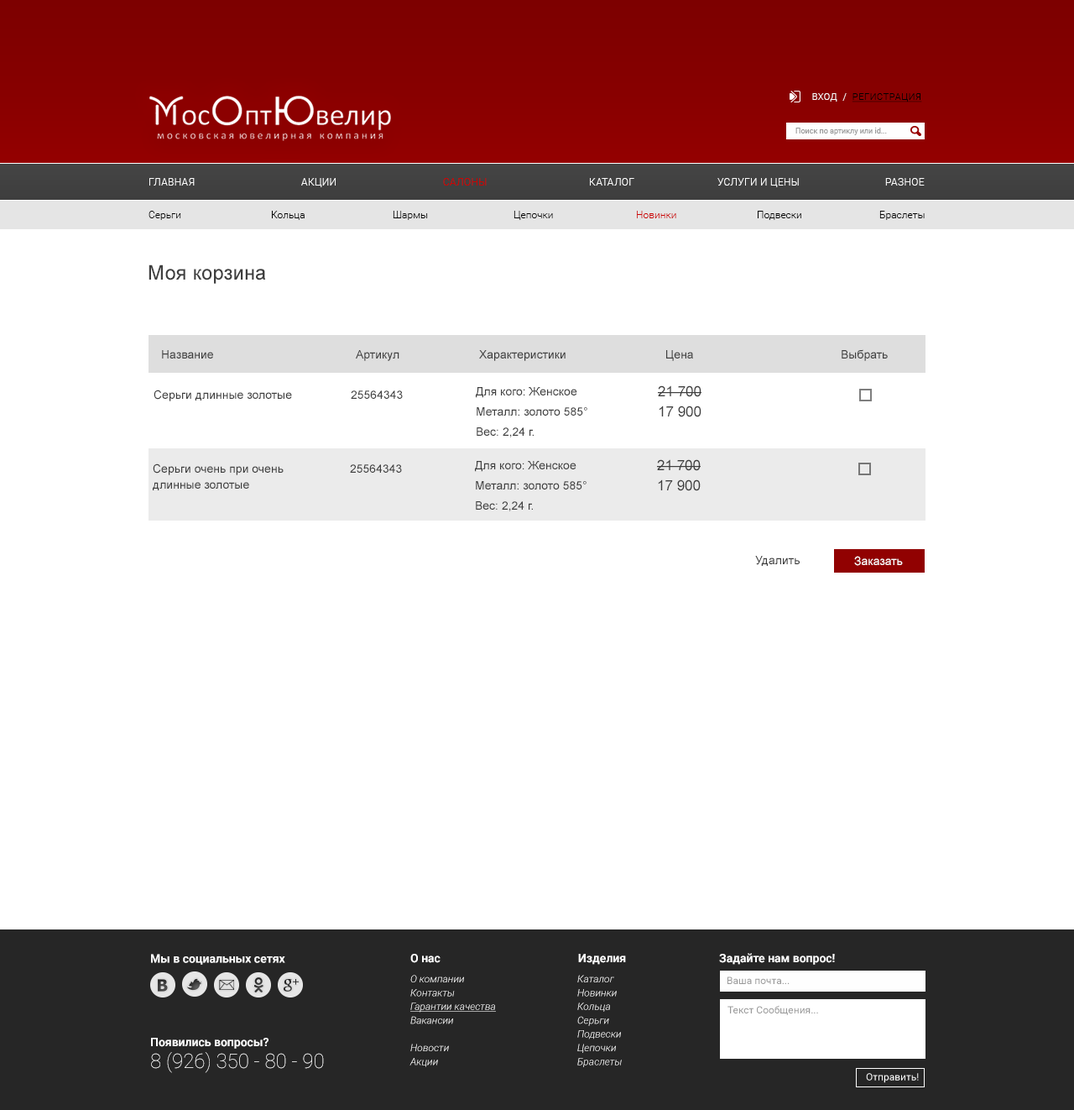
<style>
.page{position:relative;width:1074px;height:1110px;background:#ffffff}
.page>*{position:absolute;margin:0}
.t1{font:9.2px "Roboto-Light";letter-spacing:0.05em;color:#000000;text-transform:uppercase;text-decoration:underline}
.t2{font:9.2px "Roboto-Light";letter-spacing:0.05em;color:#ffffff;text-transform:uppercase}
.t3{font:7.6px "Roboto-Regular";color:#999999}
.t4{font:10.1px "Roboto-Light";letter-spacing:0.025em;color:#fefefe;text-transform:uppercase}
.t5{font:10.1px "Roboto-Light";letter-spacing:0.025em;color:#cc0000;text-transform:uppercase}
.t6{font:10.1px "Roboto-Light";color:#000000}
.t7{font:10.1px "Roboto-Light";color:#cc0000}
.t8{font:20.1px "ArialMT";color:#3e3e3e}
.t9{font:11.8px "ArialMT";color:#3e3e3e}
.t10{font:11.8px/20.1px "ArialMT";color:#3e3e3e}
.t11{font:14.3px/20.1px "ArialMT";color:#3e3e3e}
.t12{font:11.8px/15.9px "ArialMT";color:#3e3e3e}
.t13{font:11.8px "ArialMT";color:#ffffff}
.t14{font:11.8px "Roboto-Bold";color:#fefefe}
.t15{font:10.1px "Roboto-LightItalic";color:#fefefe}
.t16{font:10.1px "Roboto-LightItalic";color:#fefefe;text-decoration:underline}
.t17{font:10.1px "Roboto-Regular";color:#999999}
.t18{font:20.1px "Roboto-Thin";color:#fefefe}
</style>
<div class="page">
<p class="t1" style="left:813px;top:93px;width:110px;height:9px"><span class="t2">вход  /  </span>регистрация</p>
<p class="t3" style="left:796px;top:128px;width:91px;height:7px">Поиск по артиклу или id...</p>
<p class="t4" style="left:149px;top:178px;width:46px;height:8px">Главная</p>
<p class="t4" style="left:301px;top:178px;width:35px;height:9px">Акции</p>
<p class="t5" style="left:443px;top:178px;width:44px;height:8px">Салоны</p>
<p class="t4" style="left:590px;top:178px;width:45px;height:8px">Каталог</p>
<p class="t4" style="left:718px;top:178px;width:81px;height:9px">Услуги и Цены</p>
<p class="t4" style="left:886px;top:178px;width:39px;height:8px">Разное</p>
<p class="t6" style="left:149px;top:211px;width:32px;height:9px">Серьги</p>
<p class="t6" style="left:272px;top:211px;width:33px;height:9px">Кольца</p>
<p class="t6" style="left:393px;top:211px;width:35px;height:9px">Шармы</p>
<p class="t6" style="left:514px;top:211px;width:39px;height:9px">Цепочки</p>
<p class="t7" style="left:637px;top:211px;width:40px;height:7px">Новинки</p>
<p class="t6" style="left:758px;top:211px;width:44px;height:9px">Подвески</p>
<p class="t6" style="left:880px;top:211px;width:45px;height:9px">Браслеты</p>
<p class="t8" style="left:149px;top:264px;width:117px;height:20px">Моя корзина</p>
<p class="t9" style="left:162px;top:350px;width:51px;height:8px">Название</p>
<p class="t9" style="left:356px;top:350px;width:44px;height:11px">Артикул</p>
<p class="t9" style="left:479px;top:350px;width:87px;height:11px">Характеристики</p>
<p class="t9" style="left:667px;top:350px;width:26px;height:11px">Цена</p>
<p class="t9" style="left:842px;top:349px;width:46px;height:12px">Выбрать</p>
<p class="t9" style="left:154px;top:390px;width:138px;height:11px">Серьги длинные золотые</p>
<p class="t10" style="left:476px;top:387px;width:112px;height:50px">Для кого: Женское<br>Металл: золото 585°<br>Вес: 2,24 г.</p>
<p class="t11" style="left:658px;top:385px;width:44px;height:32px;text-align:center">21 700<br>17 900</p>
<p class="t9" style="left:351px;top:390px;width:52px;height:9px">25564343</p>
<p class="t10" style="left:475px;top:461px;width:112px;height:50px">Для кого: Женское<br>Металл: золото 585°<br>Вес: 2,24 г.</p>
<p class="t11" style="left:657px;top:459px;width:44px;height:32px;text-align:center">21 700<br>17 900</p>
<p class="t12" style="left:153px;top:463px;width:131px;height:27px">Серьги очень при очень<br>длинные золотые</p>
<p class="t9" style="left:350px;top:464px;width:52px;height:9px">25564343</p>
<p class="t9" style="left:756px;top:556px;width:44px;height:10px">Удалить</p>
<p class="t13" style="left:855px;top:556px;width:48px;height:10px">Заказать</p>
<p class="t14" style="left:151px;top:954px;width:134px;height:11px">Мы в социальных сетях</p>
<p class="t14" style="left:410px;top:954px;width:31px;height:9px">О нас</p>
<p class="t14" style="left:578px;top:954px;width:48px;height:11px">Изделия</p>
<p class="t14" style="left:719px;top:953px;width:116px;height:12px">Задайте нам вопрос!</p>
<p class="t15" style="left:410px;top:975px;width:86px;height:92px">О компании<br>Контакты<br><span class="t16">Гарантии качества<br></span>Вакансии<br><br>Новости<br>Акции</p>
<p class="t15" style="left:578px;top:975px;width:44px;height:92px">Каталог<br>Новинки<br>Кольца<br>Серьги<br>Подвески<br>Цепочки<br>Браслеты</p>
<p class="t17" style="left:728px;top:976px;width:62px;height:8px">Ваша почта...</p>
<p class="t17" style="left:728px;top:1005px;width:90px;height:10px">Текст Сообщения...</p>
<p class="t14" style="left:151px;top:1038px;width:118px;height:10px">Появились вопросы?</p>
<p class="t18" style="left:151px;top:1052px;width:173px;height:21px">8 (926) 350 - 80 - 90</p>
</div>
